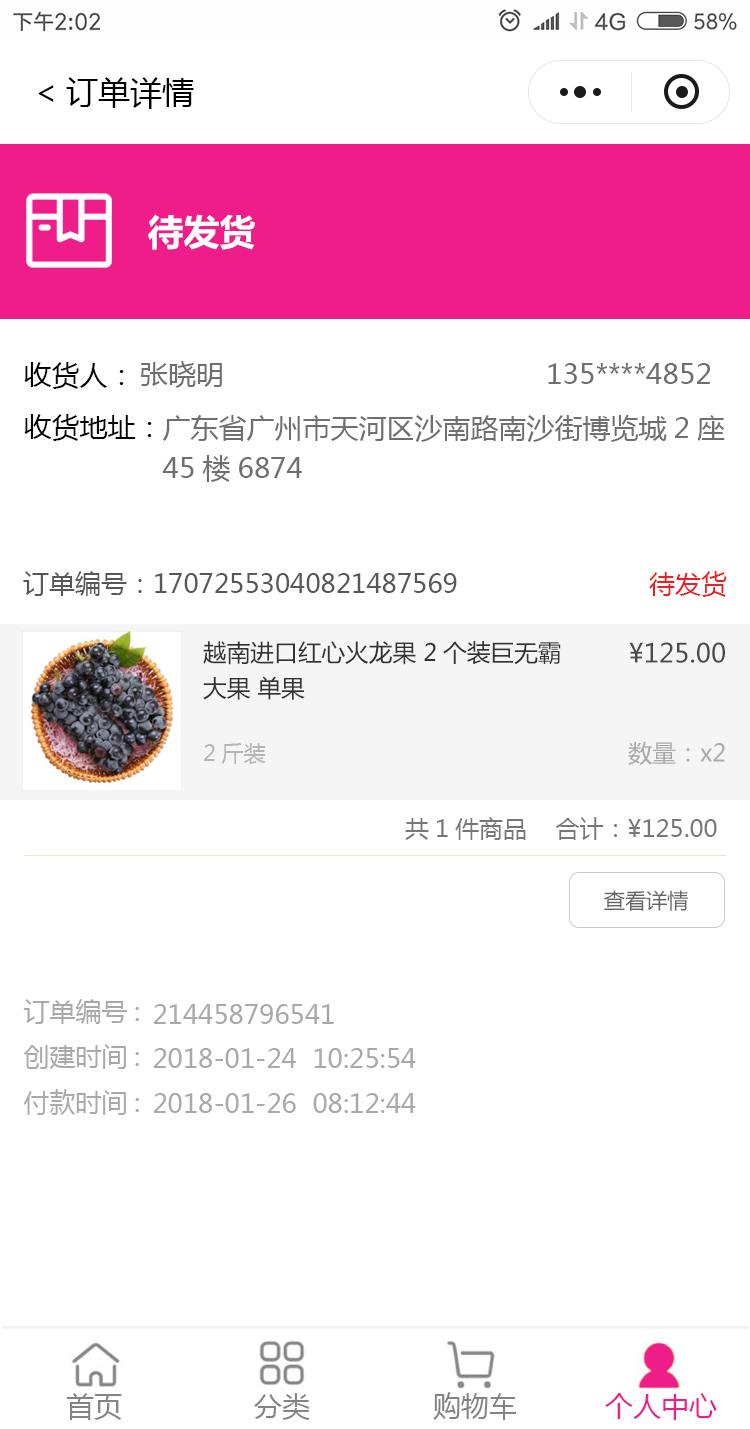
<style>
.page{position:relative;width:750px;height:1429px;background:#ffffff}
.page>*{position:absolute;margin:0}
.t1{font:32px "MicrosoftYaHei";color:#000000}
.t2{font:36px "MicrosoftYaHei-Bold";color:#ffffff}
.t3{font:28px "MicrosoftYaHei";color:#000000}
.t4{font:28px "MicrosoftYaHei";color:#6f6f6f}
.t5{font:28px/40px "MicrosoftYaHei";color:#6f6f6f}
.t6{font:26px "MicrosoftYaHei";color:#575757}
.t7{font:26px "MicrosoftYaHei";color:#eb1e24}
.t8{font:23.7px/35.5px "MicrosoftYaHei";color:#333233}
.t9{font:26px "MicrosoftYaHei";color:#4a4a4a}
.t10{font:22px "MicrosoftYaHei";color:#b5b5b5}
.t11{font:24px "MicrosoftYaHei";color:#aaa9a9}
.t12{font:24px "MicrosoftYaHei";color:#777777}
.t13{font:21px "MicrosoftYaHei";color:#666666}
.t14{font:26px "MicrosoftYaHei";color:#aaa9a9}
</style>
<div class="page">
<p class="t1" style="left:38px;top:77px;width:156px;height:32px">&lt;订单详情</p>
<p class="t2" style="left:148px;top:214px;width:107px;height:36px">待发货</p>
<p class="t3" style="left:24px;top:362px;width:100px;height:27px">收货人：</p>
<p class="t4" style="left:141px;top:361px;width:81px;height:27px">张晓明</p>
<p class="t4" style="left:548px;top:363px;width:162px;height:21px">135****4852</p>
<p class="t3" style="left:24px;top:414px;width:128px;height:27px">收货地址：</p>
<p class="t5" style="left:162px;top:415px;width:563px;height:67px">广东省广州市天河区沙南路南沙街博览城2座<br>45楼6874</p>
<p class="t6" style="left:23px;top:571px;width:434px;height:25px">订单编号：17072553040821487569</p>
<p class="t7" style="left:649px;top:571px;width:78px;height:26px">待发货</p>
<p class="t8" style="left:203px;top:641px;width:358px;height:59px">越南进口红心火龙果 2个装巨无霸大果 单果</p>
<p class="t9" style="left:629px;top:642px;width:96px;height:21px">¥125.00</p>
<p class="t10" style="left:204px;top:743px;width:62px;height:21px">2斤装</p>
<p class="t11" style="left:628px;top:741px;width:97px;height:24px">数量：x2</p>
<p class="t12" style="left:405px;top:817px;width:312px;height:23px">共1件商品    合计：¥125.00</p>
<p class="t13" style="left:604px;top:890px;width:84px;height:21px">查看详情</p>
<p class="t14" style="left:23px;top:999px;width:116px;height:25px">订单编号:</p>
<p class="t14" style="left:153px;top:1004px;width:181px;height:20px">214458796541</p>
<p class="t14" style="left:23px;top:1044px;width:116px;height:25px">创建时间:</p>
<p class="t14" style="left:153px;top:1048px;width:263px;height:20px">2018-01-24  10:25:54</p>
<p class="t14" style="left:24px;top:1089px;width:115px;height:26px">付款时间:</p>
<p class="t14" style="left:153px;top:1093px;width:263px;height:20px">2018-01-26  08:12:44</p>
</div>
